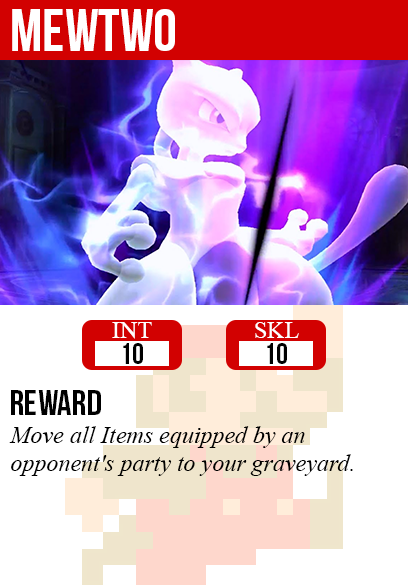
<style>
.page{position:relative;width:408px;height:585px;background:#ffffff}
.page>*{position:absolute;margin:0}
.t1{font:60px "BebasNeue";color:#ffffff}
.t2{font:24px "TimesNewRomanPSMT";color:#ffffff}
.t3{font:30px "BebasNeue";color:#000000}
.t4{font:36px "BebasNeue";color:#000000}
.t5{font:24px "TimesNewRomanPS-ItalicMT";color:#000000}
</style>
<div class="page">
<p class="t1" style="left:12px;top:9px;width:163px;height:42px">mewtwo</p>
<p class="t2" style="left:112px;top:322px;width:40px;height:17px">INT</p>
<p class="t2" style="left:255px;top:322px;width:44px;height:16px">SKL</p>
<p class="t3" style="left:123px;top:343px;width:20px;height:21px">10</p>
<p class="t3" style="left:267px;top:343px;width:20px;height:21px">10</p>
<p class="t4" style="left:11px;top:390px;width:90px;height:25px">reward</p>
<p class="t5" style="left:9px;top:426px;width:344px;height:50px">Move all Items equipped by an<br>opponent's party to your graveyard.</p>
</div>
